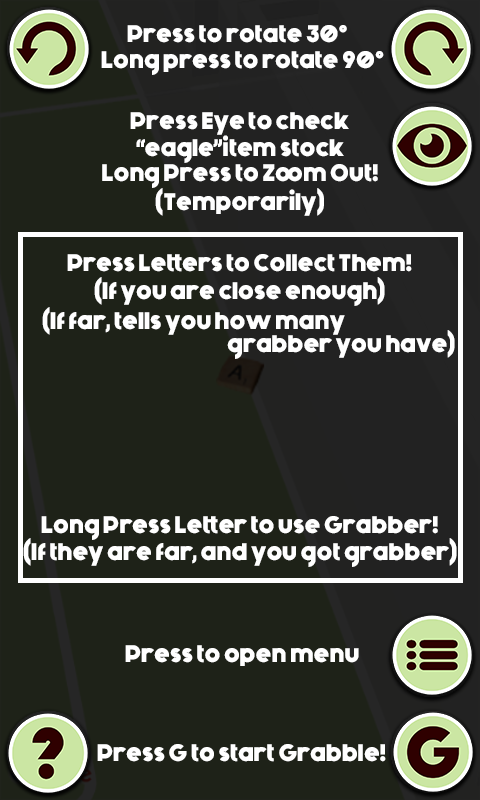
<style>
.page{position:relative;width:480px;height:800px;background:#1e2218}
.page>*{position:absolute;margin:0}
.t1{font:24px "Generica-Bold";color:#ffffff}
</style>
<div class="page">
<p class="t1" style="left:127px;top:25px;width:220px;height:18px">Press to rotate 30°</p>
<p class="t1" style="left:101px;top:51px;width:283px;height:24px">Long press to rotate 90°</p>
<p class="t1" style="left:130px;top:112px;width:219px;height:23px">Press Eye to check</p>
<p class="t1" style="left:136px;top:135px;width:208px;height:28px">“eagle”item stock</p>
<p class="t1" style="left:102px;top:164px;width:276px;height:24px">Long Press to Zoom Out!</p>
<p class="t1" style="left:155px;top:188px;width:169px;height:28px">(Temporarily)</p>
<p class="t1" style="left:67px;top:254px;width:345px;height:18px">Press Letters to Collect Them!</p>
<p class="t1" style="left:94px;top:277px;width:291px;height:29px">(If you are close enough)</p>
<p class="t1" style="left:42px;top:307px;width:303px;height:28px">(If far, tells you how many</p>
<p class="t1" style="left:227px;top:330px;width:228px;height:29px">grabber you have)</p>
<p class="t1" style="left:41px;top:516px;width:397px;height:24px">Long Press Letter to use Grabber!</p>
<p class="t1" style="left:23px;top:538px;width:434px;height:29px">(If they are far, and you got grabber)</p>
<p class="t1" style="left:125px;top:645px;width:234px;height:21px">Press to open menu</p>
<p class="t1" style="left:97px;top:744px;width:289px;height:18px">Press G to start Grabble!</p>
</div>
